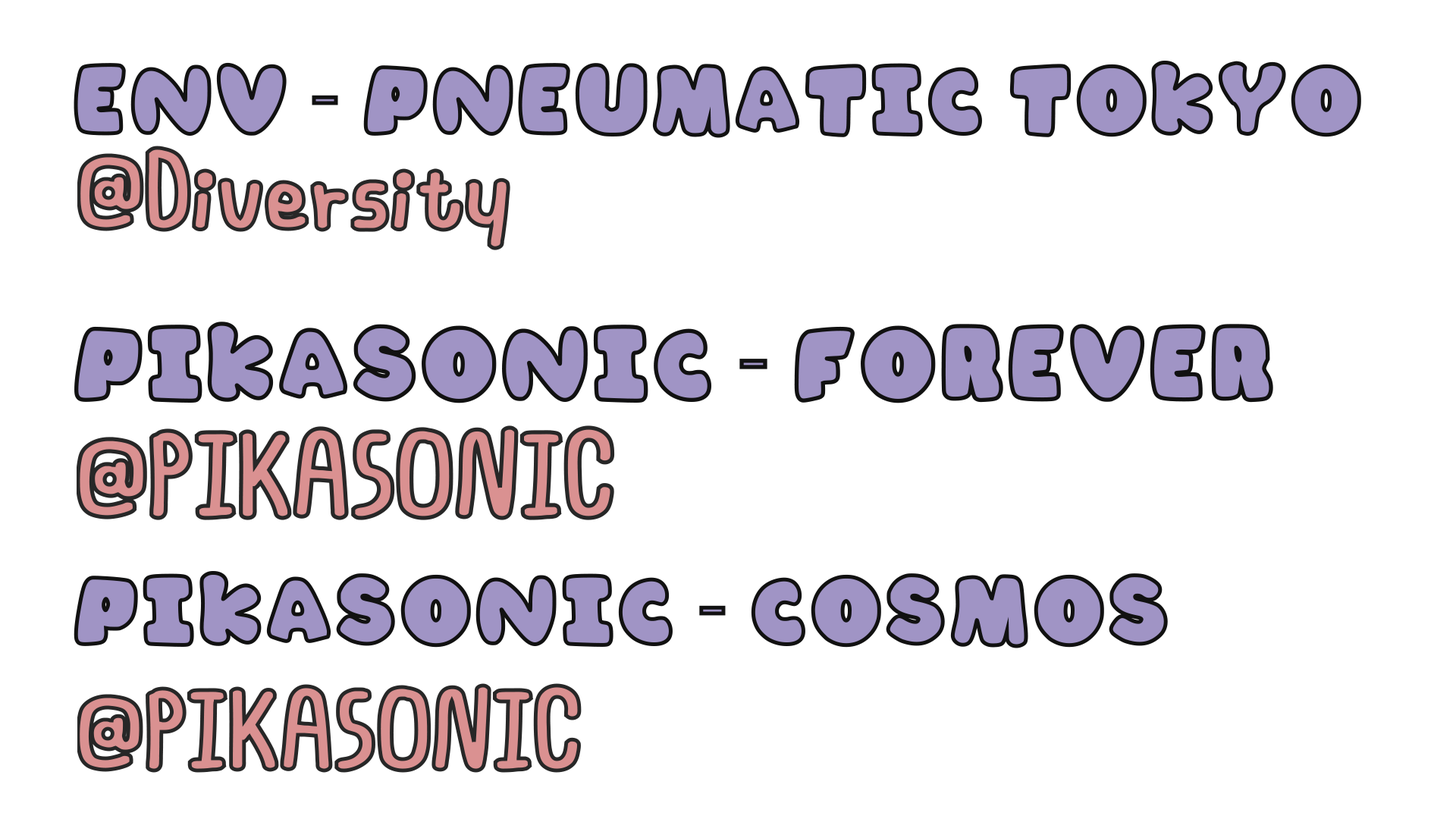
<style>
.page{position:relative;width:1456px;height:819px;background:#ffffff}
.page>*{position:absolute;margin:0}
.t1{font:89.3px "TunyongFontV2-Regular";color:#a195c6}
.t2{font:89.3px "MyriadPro-Regular";color:#a195c6}
.t3{font:96.7px "FHMustardBold"}
.t4{font:89.3px "TunyongFontV2-Regular"}
.t5{font:95.5px "TunyongFontV2-Regular";color:#a195c6}
.t6{font:95.5px "MyriadPro-Regular";color:#a195c6}
.t7{font:103.4px "FHMustardBold"}
.t8{font:95.5px "TunyongFontV2-Regular"}
.t9{font:89.6px "TunyongFontV2-Regular";color:#a195c6}
.t10{font:89.6px "MyriadPro-Regular";color:#a195c6}
.t11{font:97.1px "FHMustardBold"}
.t12{font:89.6px "TunyongFontV2-Regular"}
</style>
<div class="page">
<p class="t1" style="left:74px;top:61px;width:1287px;height:77px">EnV <span class="t2">-</span> Pneumatic Tokyo</p>
<p class="t3" style="left:77px;top:146px;width:433px;height:104px"><span class="t4"><br></span>@Diversity</p>
<p class="t5" style="left:74px;top:322px;width:1199px;height:81px">PIKASONIC <span class="t6">-</span> Forever</p>
<p class="t7" style="left:77px;top:425px;width:538px;height:95px"><span class="t8"><br></span>@PIKASONIC</p>
<p class="t9" style="left:74px;top:571px;width:1094px;height:77px">PIKASONIC <span class="t10">-</span> Cosmos</p>
<p class="t11" style="left:77px;top:683px;width:505px;height:90px"><span class="t12"><br></span>@PIKASONIC</p>
</div>
